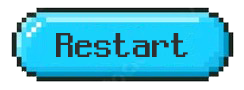
<style>
.page{position:relative;width:244px;height:90px;background:#ffffff}
.page>*{position:absolute;margin:0}
.t1{font:38.2px "NeoDunggeunmo-Regular";color:#2f2f2f}
</style>
<div class="page">
<p class="t1" style="left:56px;top:33px;width:132px;height:24px">Restart</p>
</div>
